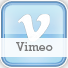
<style>
.page{position:relative;width:68px;height:68px}
.page>*{position:absolute;margin:0}
.t1{font:12px "Rockwell";letter-spacing:0.01em;color:#7b7b7b}
</style>
<div class="page">
<p class="t1" style="left:16px;top:42px;width:37px;height:9px">Vimeo</p>
</div>
